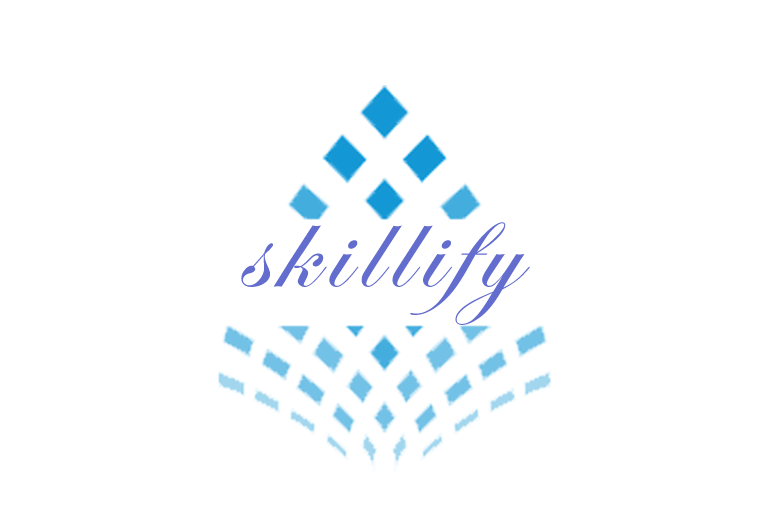
<style>
.page{position:relative;width:768px;height:512px;background:#ffffff}
.page>*{position:absolute;margin:0}
.t1{font:119.8px "EdwardianScriptITC";letter-spacing:0.075em;color:#636dce;scale:1.1 1}
</style>
<div class="page">
<p class="t1" style="left:241px;top:222px;width:289px;height:103px">skillify</p>
</div>
